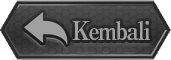
<style>
.page{position:relative;width:171px;height:60px}
.page>*{position:absolute;margin:0}
.t1{font:25px "RyuminPro-ExBold";letter-spacing:-0.08em;color:#a0a0a0;scale:0.9 1}
</style>
<div class="page">
<p class="t1" style="left:72px;top:21px;width:78px;height:19px">Kembali</p>
</div>
